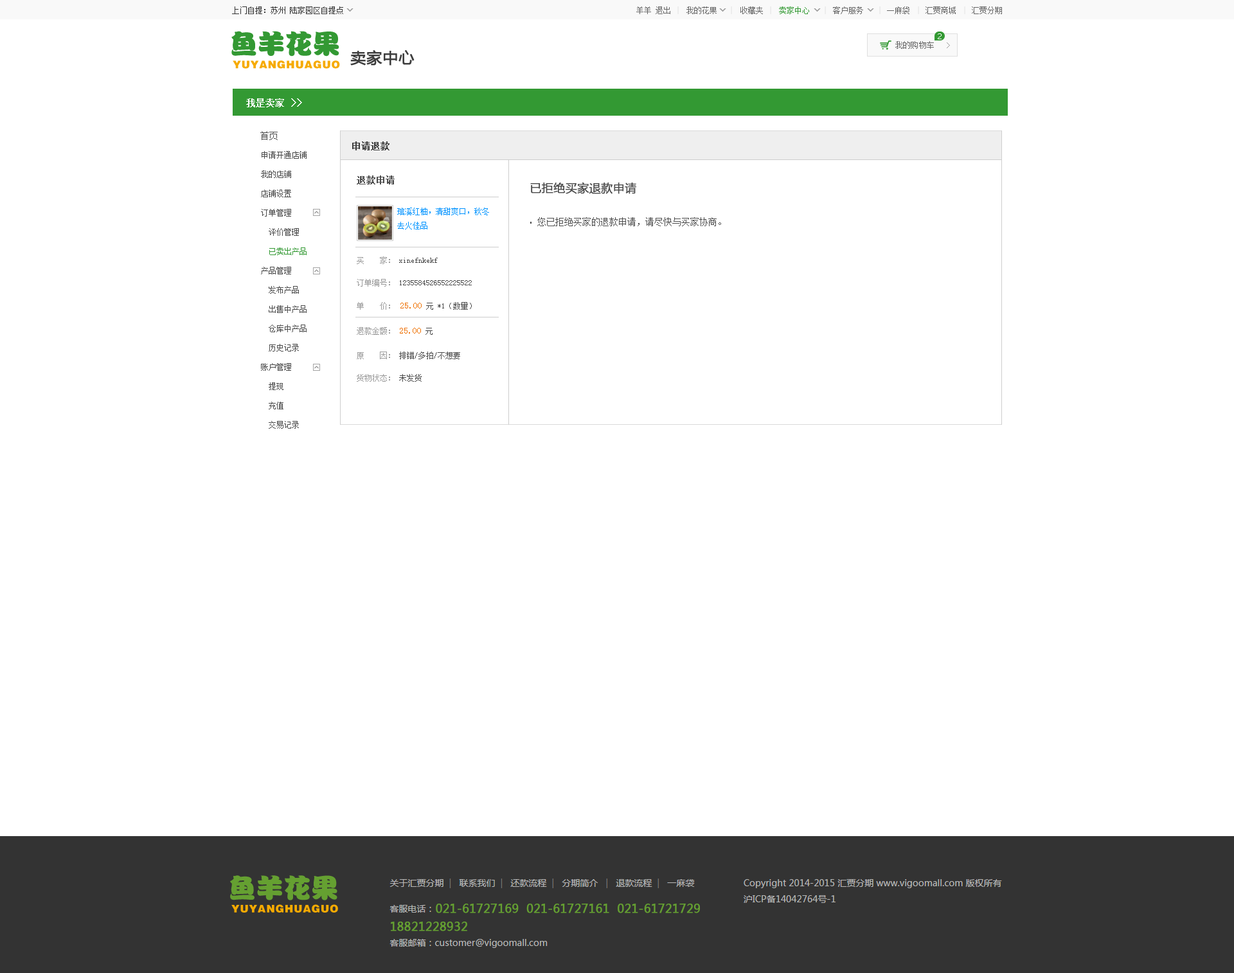
<style>
.page{position:relative;width:1234px;height:973px;background:#ffffff}
.page>*{position:absolute;margin:0}
.t1{font:9px "SimSun";color:#4b4b4b}
.t2{font:9px "SimSun";color:#3e3e3e;font-weight:bold}
.t3{font:7.7px/19.3px "SimSun";color:#4b4b4b}
.t4{font:7.7px/19.3px "SimSun";color:#339933}
.t5{font:9px "SimSun";color:#4b4b4b;font-weight:bold}
.t6{font:11.6px "MicrosoftYaHei";color:#4b4b4b;font-weight:bold}
.t7{font:7.7px/14.1px "SimSun";color:#0094ff}
.t8{font:7.7px/22.5px "SimSun";color:#4b4b4b}
.t9{font:7.7px/22.5px "SimSun";color:#9a9a9a}
.t10{font:7.7px/25.1px "SimSun";color:#9a9a9a}
.t11{font:9px/25.1px "SimSun";color:#ee7000}
.t12{font:7.7px/25.1px "SimSun";color:#4b4b4b}
</style>
<div class="page">
<p class="t1" style="left:260px;top:131px;width:18px;height:9px">首页</p>
<p class="t2" style="left:352px;top:141px;width:38px;height:9px">申请退款</p>
<p class="t3" style="left:261px;top:151px;width:46px;height:278px">申请开通店铺<br>我的店铺<br>店铺设置<br>订单管理<br>  评价管理<br> <span class="t4"> 已卖出产品<br></span>产品管理<br>  发布产品<br>  出售中产品<br>  仓库中产品<br>  历史记录<br>账户管理<br>  提现<br>  充值<br>  交易记录</p>
<p class="t5" style="left:357px;top:176px;width:38px;height:8px">退款申请</p>
<p class="t6" style="left:530px;top:182px;width:106px;height:12px">已拒绝买家退款申请</p>
<p class="t7" style="left:397px;top:208px;width:92px;height:22px">琯溪红柚，清甜爽口，秋冬<br>去火佳品</p>
<p class="t1" style="left:537px;top:217px;width:184px;height:9px">您已拒绝买家的退款申请，请尽快与买家协商。</p>
<p class="t8" style="left:357px;top:256px;width:115px;height:126px"><span class="t9">买    家：</span> xinefnkekf<br><span class="t9">订单编号：</span> 1235584526552225522<br><span class="t10">单    价： </span><span class="t11">25.00</span><span class="t12"> 元 *1（数量）<br></span><span class="t10">退款金额： </span><span class="t11">25.00 </span><span class="t12">元<br></span><span class="t9">原    因：</span> 排错/多拍/不想要<br><span class="t9">货物状态：</span> 未发货</p>
</div>
